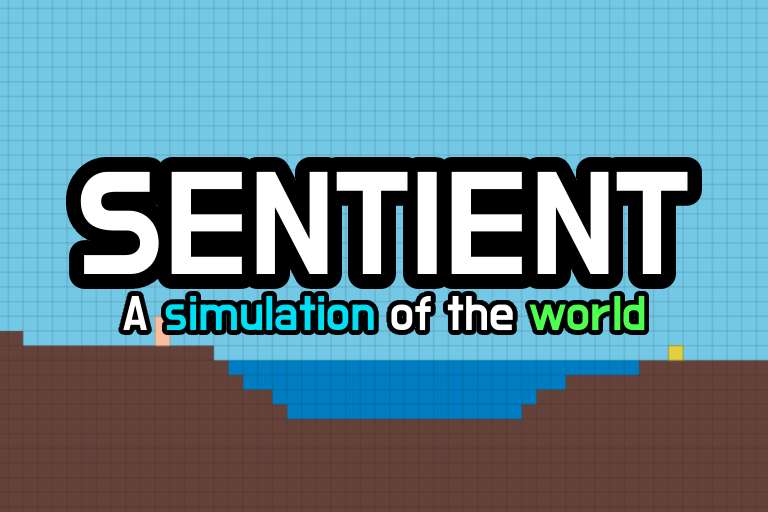
<style>
.page{position:relative;width:768px;height:512px;background:#73c8e6}
.page>*{position:absolute;margin:0}
.t1{font:150px "DoHyeon-Regular";color:#ffffff}
.t2{font:50px "DoHyeon-Regular";color:#00e0f4}
.t3{font:50px "DoHyeon-Regular";color:#ffffff}
.t4{font:50px "DoHyeon-Regular";color:#4eff4f}
</style>
<div class="page">
<p class="t1" style="left:80px;top:171px;width:608px;height:103px">SENTIENT</p>
<p class="t2" style="left:123px;top:295px;width:522px;height:36px"><span class="t3">A </span>simulation <span class="t3">of the </span><span class="t4">world</span></p>
</div>
